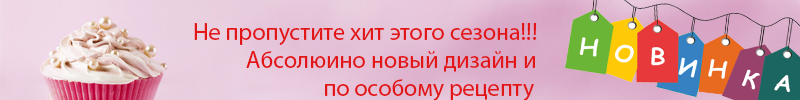
<style>
.page{position:relative;width:800px;height:100px}
.page>*{position:absolute;margin:0}
.t1{font:24px "MyriadPro-Regular";color:#e21616}
</style>
<div class="page">
<p class="t1" style="left:194px;top:23px;width:343px;height:22px">Не пропустите хит этого сезона!!!</p>
<p class="t1" style="left:246px;top:51px;width:289px;height:50px">Абсолюино новый дизайн и <br>   по особому рецепту</p>
</div>
